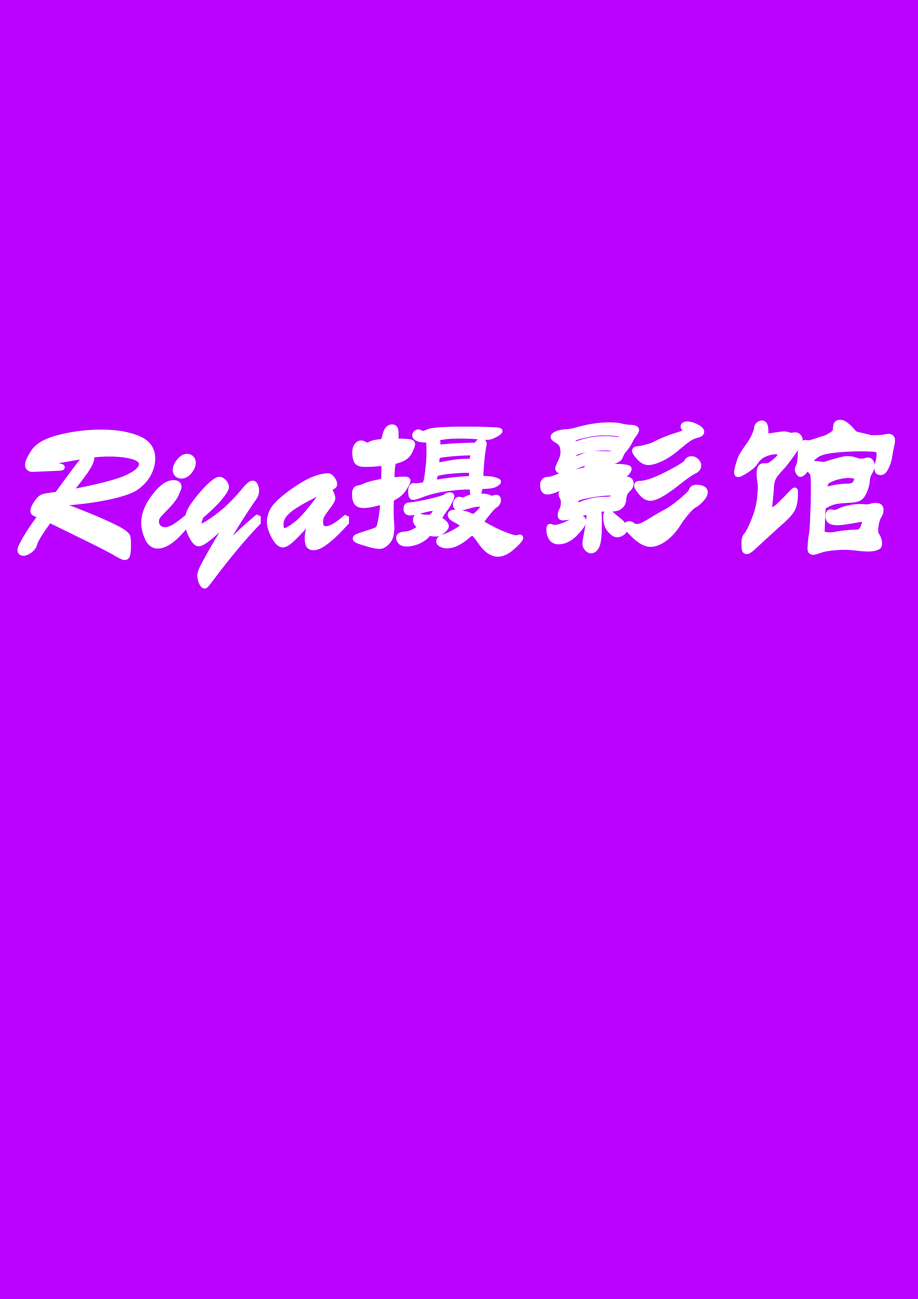
<style>
.page{position:relative;width:918px;height:1299px;background:#ba00ff}
.page>*{position:absolute;margin:0}
.t1{font:185.1px "STXingkai";color:#ffffff;font-weight:bold}
.t2{font:185.1px "STLiti";color:#ffffff;font-weight:bold}
</style>
<div class="page">
<p class="t1" style="left:17px;top:419px;width:878px;height:170px">Riya<span class="t2">摄影馆</span></p>
</div>
